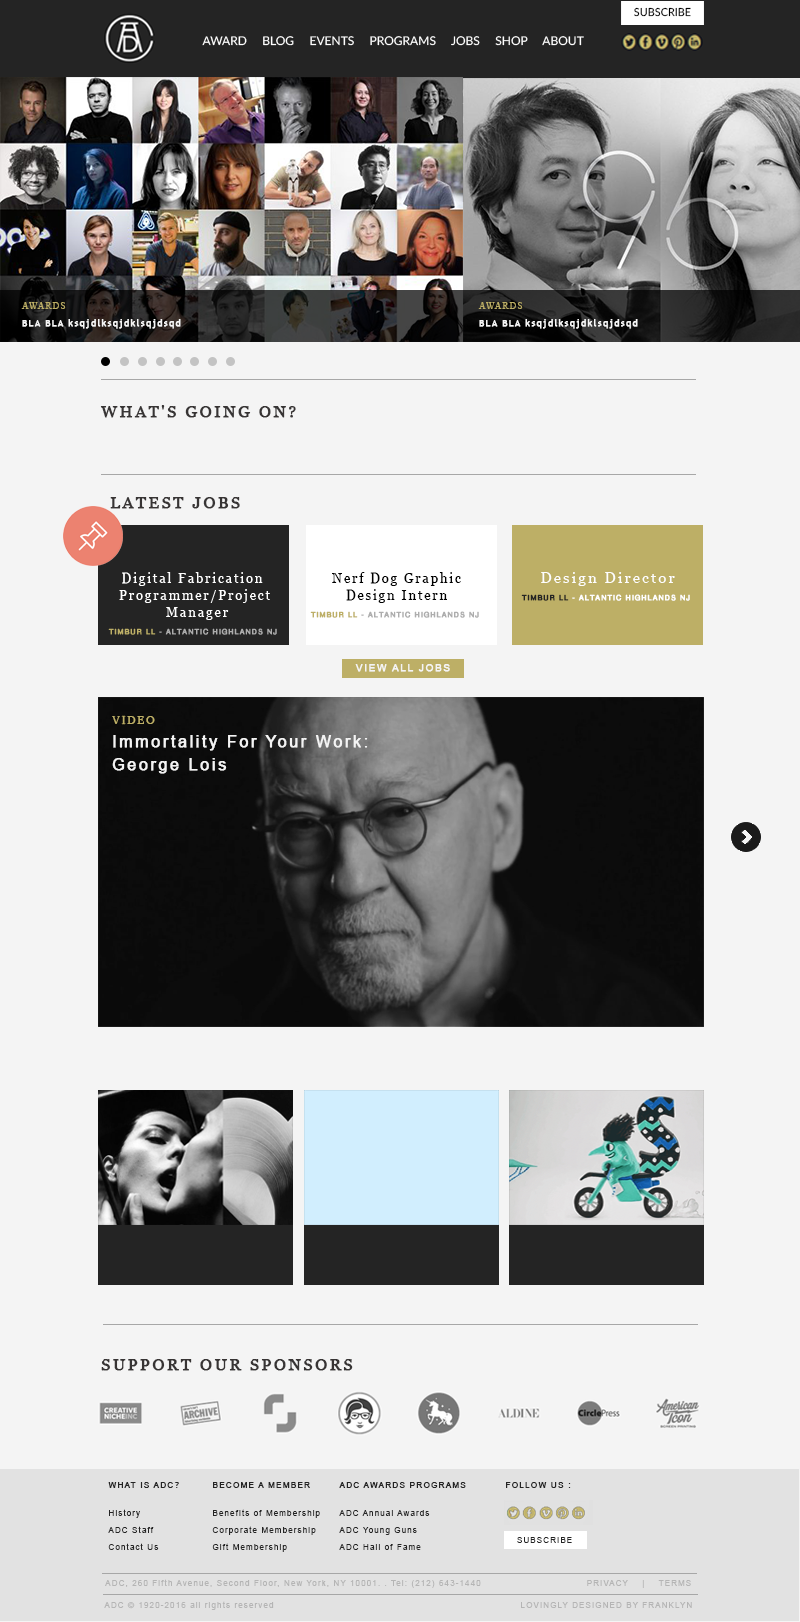
<style>
.page{position:relative;width:800px;height:1622px;background:#f4f4f4}
.page>*{position:absolute;margin:0}
.t1{font:11px "Lato-Regular";color:#000000;text-transform:uppercase}
.t2{font:9px/17px "TrebuchetMS";letter-spacing:0.14em;color:#f7f7f7;font-weight:bold}
.t3{font:9px/17px "TimesNewRomanPSMT";letter-spacing:0.14em;color:#bdaf66;text-transform:uppercase}
.t4{font:16px "Georgia";letter-spacing:0.14em;color:#373434;text-transform:uppercase;font-weight:bold}
.t5{font:13px/17px "Georgia";letter-spacing:0.14em;color:#000000}
.t6{font:7px/17px "KhmerOS";letter-spacing:0.14em;color:#bdaf66;text-transform:uppercase;font-weight:bold}
.t7{font:7px/17px "KhmerOS";letter-spacing:0.14em;color:#adadad;text-transform:uppercase;font-weight:bold}
.t8{font:7px/17px "KhmerOS";letter-spacing:0.14em;color:#ffffff;text-transform:uppercase;font-weight:bold}
.t9{font:15px/17px "Georgia";letter-spacing:0.14em;color:#fefefe}
.t10{font:7px/17px "KhmerOS";letter-spacing:0.14em;color:#242424;text-transform:uppercase;font-weight:bold}
.t11{font:10px "ArialMT";letter-spacing:0.14em;color:#f4f4f4;text-transform:uppercase;font-weight:bold}
.t12{font:16px/23px "ArialMT";letter-spacing:0.14em;color:#f4f4f4;font-weight:bold}
.t13{font:12px/23px "AbyssinicaSIL";letter-spacing:0.14em;color:#bdaf66;text-transform:uppercase}
.t14{font:8px/17px "ArialMT";letter-spacing:0.14em;color:#242424}
.t15{font:8px/17px "ArialMT";letter-spacing:0.14em;color:#242424;text-transform:uppercase;font-weight:bold}
.t16{font:8px "ArialMT";letter-spacing:0.14em;color:#242424;text-transform:uppercase;font-weight:bold}
.t17{font:8px "ArialMT";letter-spacing:0.14em;color:#242424;text-transform:uppercase}
.t18{font:8px "ArialMT";letter-spacing:0.14em;color:#b5b5b5}
.t19{font:8px "ArialMT";letter-spacing:0.14em;color:#b5b5b5;text-transform:uppercase}
</style>
<div class="page">
<p class="t1" style="left:634px;top:7px;width:57px;height:10px">SUBSCRIBE</p>
<p class="t2" style="left:21px;top:302px;width:160px;height:27px"><span class="t3">AWARDS<br></span>BLA BLA ksqjdlksqjdklsqjdsqd</p>
<p class="t2" style="left:478px;top:302px;width:160px;height:27px"><span class="t3">AWARDS<br></span>BLA BLA ksqjdlksqjdklsqjdsqd</p>
<p class="t4" style="left:100px;top:405px;width:196px;height:13px">What's Going On?</p>
<p class="t4" style="left:110px;top:497px;width:130px;height:12px">Latest Jobs</p>
<p class="t5" style="left:310px;top:572px;width:169px;height:46px;text-align:center">Nerf Dog Graphic<br>Design Intern<br><span class="t6">Timbur LL</span><span class="t7"> - aLTANTIC HIGHLANDS NJ</span></p>
<p class="t8" style="left:521px;top:572px;width:169px;height:29px;text-align:center"><span class="t9">Design Director<br></span><span class="t10">Timbur LL </span>- aLTANTIC HIGHLANDS NJ</p>
<p class="t11" style="left:355px;top:664px;width:95px;height:8px">view all jobs</p>
<p class="t12" style="left:112px;top:715px;width:256px;height:59px"><span class="t13">Video<br></span>Immortality For Your Work: <br>George Lois</p>
<p class="t4" style="left:101px;top:1359px;width:252px;height:12px">SUPPORT OUR SPONSORS</p>
<p class="t14" style="left:108px;top:1482px;width:71px;height:68px"><span class="t15">What is ADC?<br><br></span>History<br>ADC Staff<br>Contact Us</p>
<p class="t14" style="left:212px;top:1482px;width:108px;height:70px"><span class="t15">Become A Member<br><br></span>Benefits of Membership<br>Corporate Membership<br>Gift Membership</p>
<p class="t14" style="left:339px;top:1482px;width:127px;height:68px"><span class="t15">ADC Awards Programs<br><br></span>ADC Annual Awards<br>ADC Young Guns<br>ADC Hall of Fame</p>
<p class="t16" style="left:506px;top:1482px;width:65px;height:6px">FOLLOW US :</p>
<p class="t17" style="left:517px;top:1537px;width:55px;height:6px">SUBSCRIBE</p>
<p class="t18" style="left:105px;top:1579px;width:586px;height:9px">ADC, 260 Fifth Avenue, Second Floor, New York, NY 10001. . Tel: (212) 643-1440        <span class="t19">Privacy    |    Terms</span></p>
<p class="t18" style="left:104px;top:1601px;width:588px;height:9px">ADC © 1920-2016 all rights reserved              <span class="t19"> Lovingly designed by Franklyn</span></p>
</div>
